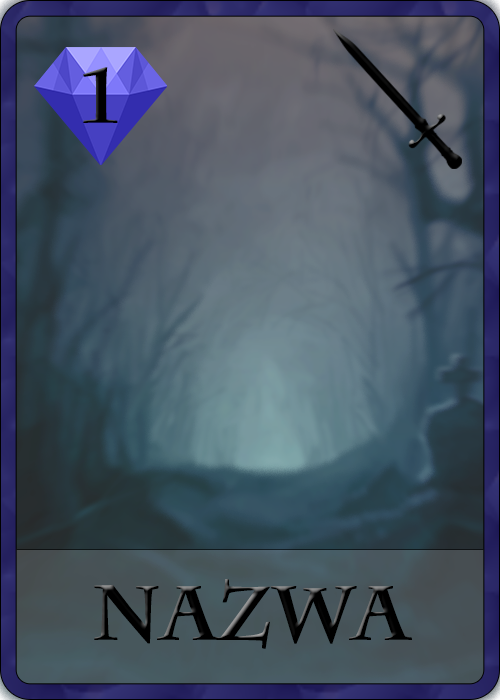
<style>
.page{position:relative;width:500px;height:700px}
.page>*{position:absolute;margin:0}
.t1{font:75px "CharlemagneStd-Bold";color:#000000;font-weight:bold}
</style>
<div class="page">
<p class="t1" style="left:83px;top:67px;width:35px;height:56px">1</p>
<p class="t1" style="left:94px;top:579px;width:318px;height:70px">nazwa</p>
</div>
